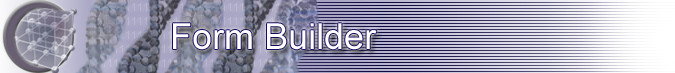
<style>
.page{position:relative;width:675px;height:73px}
.page>*{position:absolute;margin:0}
.t1{font:36px "ArialMT";color:#ffffff}
</style>
<div class="page">
<p class="t1" style="left:173px;top:23px;width:204px;height:27px">Form Builder</p>
</div>
